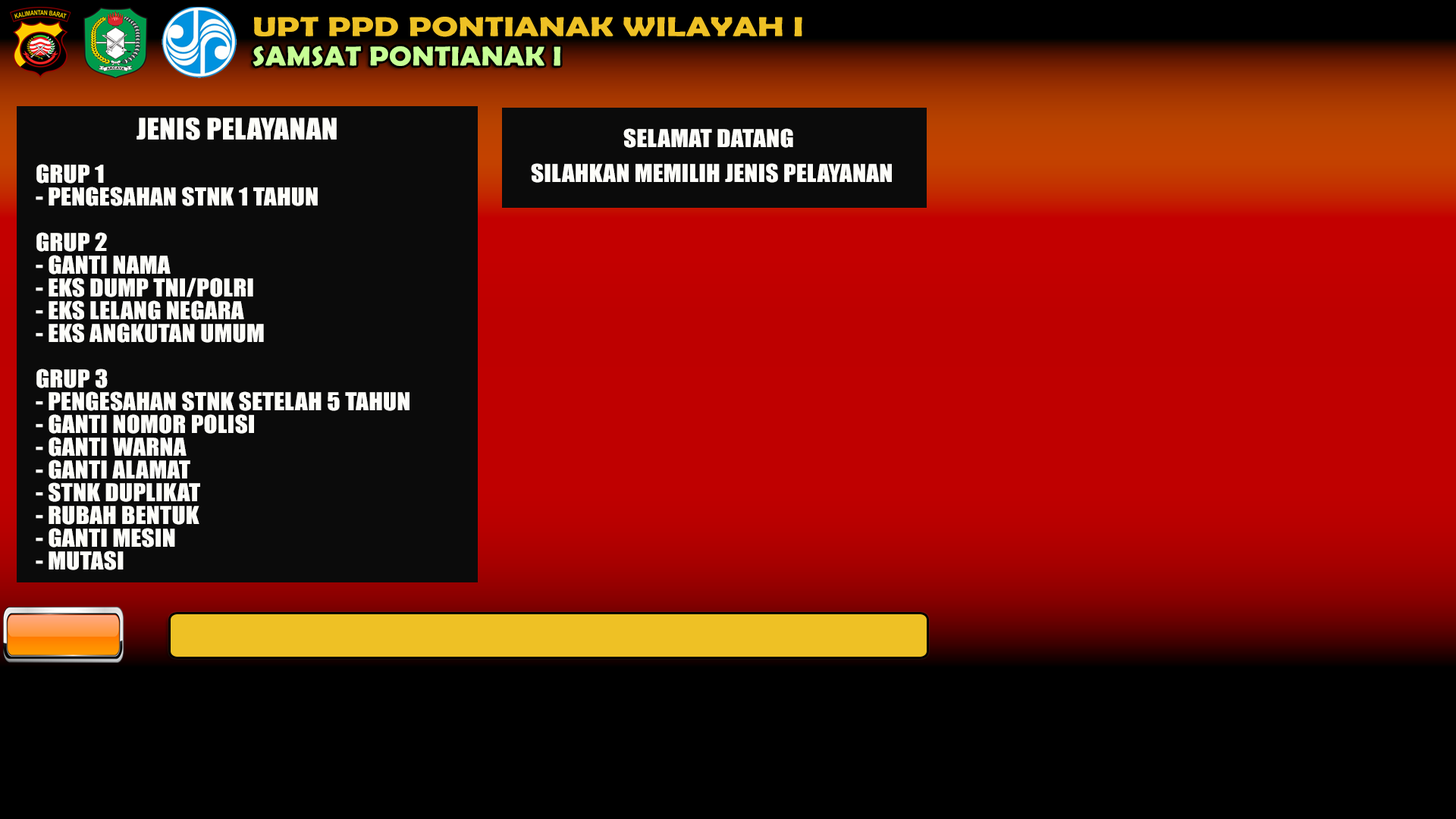
<style>
.page{position:relative;width:1456px;height:819px;background:#000000}
.page>*{position:absolute;margin:0}
.t1{font:27.5px "BerlinSansFBDemi-Bold";letter-spacing:0.01em;color:#eec125;scale:1.27 1}
.t2{font:27.3px "BerlinSansFBDemi-Bold";letter-spacing:0.01em;color:#c7fe95;scale:1.1 1}
.t3{font:27.3px "Impact";letter-spacing:0.01em;color:#fdfdf9;scale:1.1 1}
.t4{font:22.7px "Impact";letter-spacing:0.01em;color:#fdfdf9;scale:1.1 1}
.t5{font:22.7px/22.7px "Impact";letter-spacing:0.01em;color:#fdfdf9;scale:1.1 1}
</style>
<div class="page">
<p class="t1" style="left:254px;top:17px;width:548px;height:20px">UPT PPD PONTIANAK WILAYAH I</p>
<p class="t2" style="left:253px;top:45px;width:307px;height:22px">SAMSAT PONTIANAK I</p>
<p class="t3" style="left:136px;top:118px;width:201px;height:22px">JENIS PELAYANAN</p>
<p class="t4" style="left:623px;top:128px;width:170px;height:20px">SELAMAT DATANG</p>
<p class="t5" style="left:36px;top:164px;width:373px;height:406px">GRUP 1<br>- PENGESAHAN STNK 1 TAHUN<br><br>GRUP 2<br>- GANTI NAMA<br>- EKS DUMP TNI/POLRI<br>- EKS LELANG NEGARA<br>- EKS ANGKUTAN UMUM<br><br>GRUP 3<br>- PENGESAHAN STNK SETELAH 5 TAHUN<br>- GANTI NOMOR POLISI<br>- GANTI WARNA<br>- GANTI ALAMAT<br>- STNK DUPLIKAT<br>- RUBAH BENTUK<br>- GANTI MESIN<br>- MUTASI</p>
<p class="t4" style="left:531px;top:163px;width:361px;height:20px">SILAHKAN MEMILIH JENIS PELAYANAN</p>
</div>
